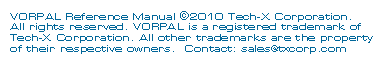
<style>
.page{position:relative;width:384px;height:64px;background:#ffffff}
.page>*{position:absolute;margin:0}
.t1{font:9px "EurostileLTStd-Ex2";color:#006699}
.t2{font:12px "EurostileLTStd-Ex2";color:#006699}
</style>
<div class="page">
<p class="t1" style="left:10px;top:11px;width:363px;height:43px">VORPAL Reference Manual <span class="t2">©</span>2010 Tech-X Corporation.<br>All rights reserved. VORPAL is a registered trademark of Tech-X Corporation. All other trademarks are the property of their respective owners.  Contact: sales@txcorp.com</p>
</div>
